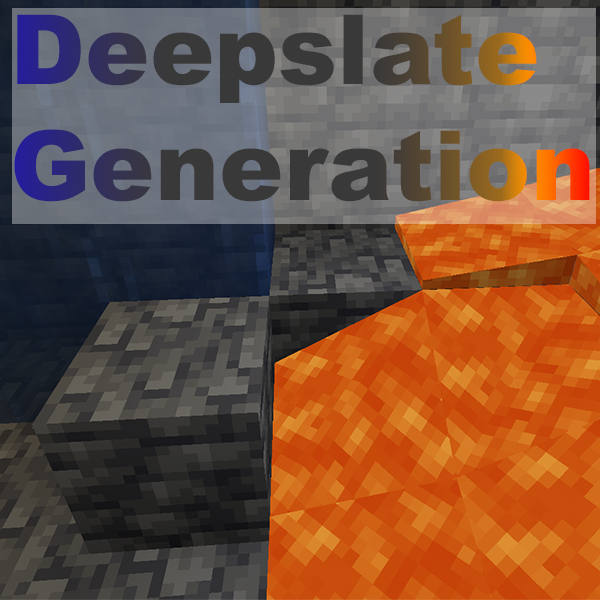
<style>
.page{position:relative;width:600px;height:600px}
.page>*{position:absolute;margin:0}
.t1{font:96.8px "Arial-Black"}
</style>
<div class="page">
<p class="t1" style="left:14px;top:14px;width:576px;height:188px">Deepslate<br>Generation</p>
</div>
